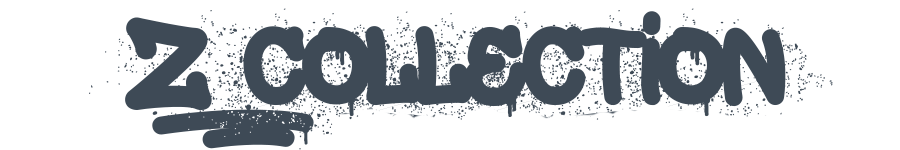
<style>
.page{position:relative;width:900px;height:150px;background:#ffffff}
.page>*{position:absolute;margin:0}
.t1{font:141.7px "Painterz";color:#3e4a56}
.t2{font:150px "Painterz";color:#3e4a56}
.t3{font:125px "Painterz";color:#3e4a56}
</style>
<div class="page">
<p class="t1" style="left:89px;top:8px;width:336px;height:142px">&amp;</p>
<p class="t2" style="left:125px;top:17px;width:87px;height:93px">Z</p>
<p class="t3" style="left:243px;top:11px;width:543px;height:106px">Collection</p>
</div>
